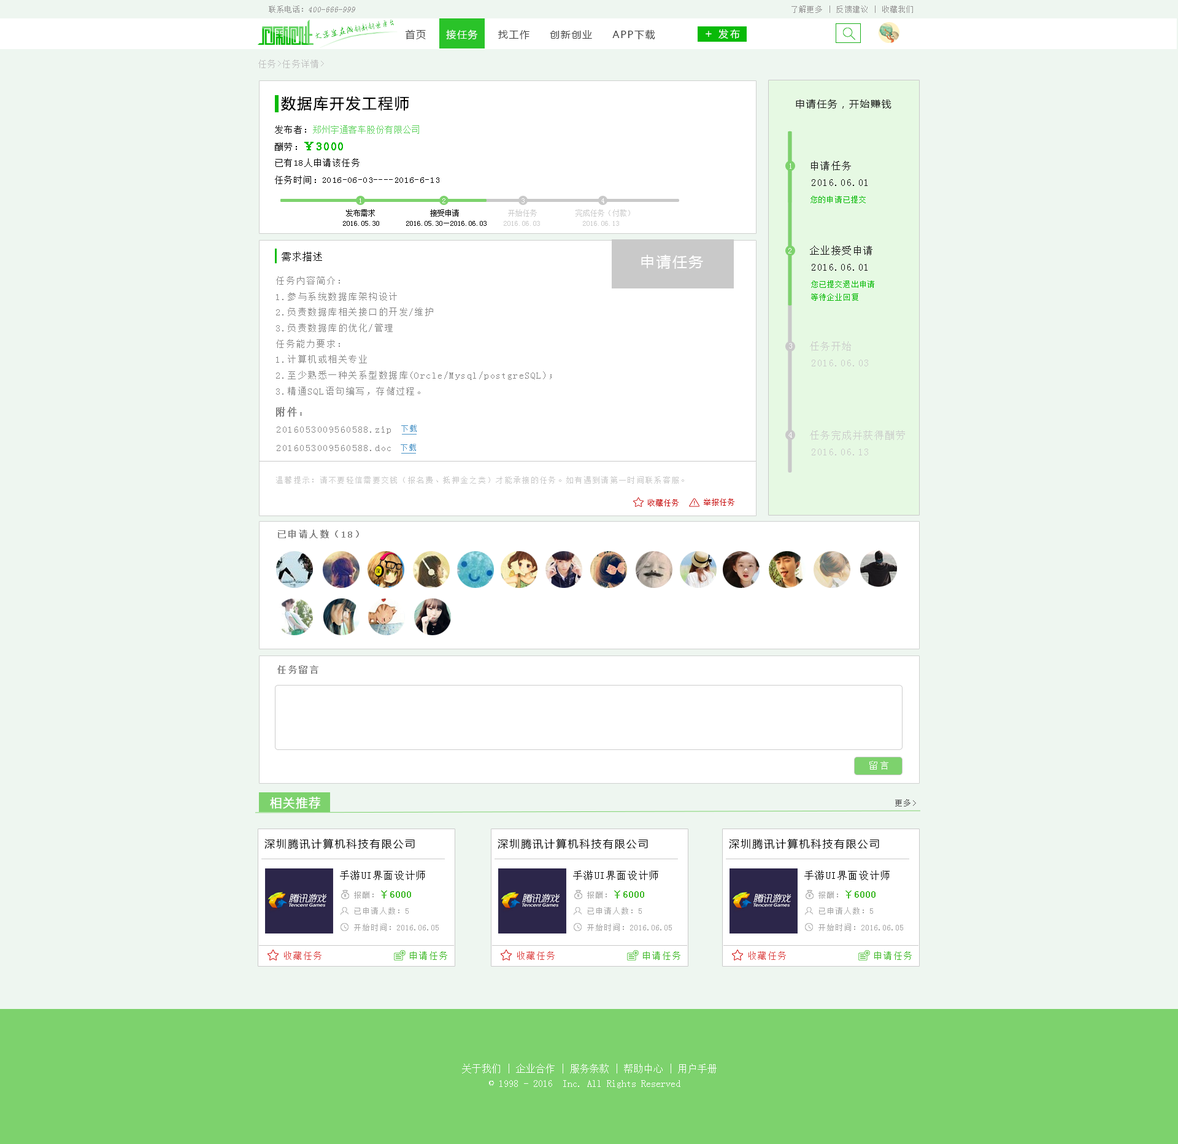
<style>
.page{position:relative;width:1178px;height:1144px;background:#eef6f0}
.page>*{position:absolute;margin:0}
.t1{font:8.2px "SimSun";color:#959595;font-style:italic}
.t2{font:8.2px "SimSun";color:#959595}
.t3{font:7.4px "SimSun";letter-spacing:0.1em;color:#959494}
.t4{font:7.6px "AnJingCheng-Xing-2.0";letter-spacing:-0.01em;color:#09ba08}
.t5{font:8.5px "AnJingCheng-Xing-2.0";letter-spacing:-0.01em;color:#09ba08}
.t6{font:9.8px "MicrosoftYaHei";letter-spacing:0.1em;color:#3e3e3e}
.t7{font:9.8px "MicrosoftYaHei";letter-spacing:0.1em;color:#ffffff}
.t8{font:9.8px "MicrosoftYaHei";letter-spacing:0.2em;color:#ffffff}
.t9{font:11.5px "MicrosoftYaHei";letter-spacing:0.2em;color:#ffffff}
.t10{font:8.6px "SimSun";letter-spacing:0.1em;color:#bebebe}
.t11{font:14.7px "MicrosoftYaHei";letter-spacing:0.1em;color:#000000}
.t12{font:9.8px "MicrosoftYaHei";letter-spacing:0.1em;color:#151515}
.t13{font:8.6px "SimSun";letter-spacing:0.05em;color:#62d361}
.t14{font:8.6px "SimSun";letter-spacing:0.1em;color:#000000}
.t15{font:11px "SimSun";letter-spacing:0.1em;color:#09ba08;font-weight:bold}
.t16{font:9.8px "SimSun";letter-spacing:0.1em;color:#151515}
.t17{font:7.8px "SimSun";letter-spacing:0.1em;color:#ffffff;scale:1.05 1}
.t18{font:7.4px "SimSun";letter-spacing:0.1em;color:#09ba08}
.t19{font:7.4px "SimSun";color:#000000}
.t20{font:7.4px "SimSun";letter-spacing:0.1em;color:#ffffff}
.t21{font:7.4px "SimSun";color:#c9c9c9}
.t22{font:10.6px "SimSun";color:#000000}
.t23{font:14.7px "MicrosoftYaHei";letter-spacing:0.1em;color:#ffffff}
.t24{font:9px "SimSun";letter-spacing:0.1em;color:#868686}
.t25{font:9.8px "SimSun";letter-spacing:0.1em;color:#c9c9c9}
.t26{font:9.8px "SimSun";letter-spacing:0.1em;color:#868686;font-weight:bold}
.t27{font:8.2px "SimSun";letter-spacing:0.1em;color:#4a93c6}
.t28{font:8.2px "SimSun";letter-spacing:0.1em;color:#c7c7c7}
.t29{font:8.2px "SimSun";color:#c70d0d}
.t30{font:9px "SimSun";letter-spacing:0.1em;color:#868686;font-weight:bold}
.t31{font:9px "SimSun";letter-spacing:0.2em;color:#ffffff}
.t32{font:11.5px "MicrosoftYaHei";letter-spacing:0.1em;color:#ffffff;font-weight:bold}
.t33{font:8.2px "SimSun";letter-spacing:0.1em;color:#505050}
.t34{font:10.6px "MicrosoftYaHei";letter-spacing:0.1em;color:#000000}
.t35{font:9.8px "SimSun";letter-spacing:0.1em;color:#000000}
.t36{font:9.8px "NSimSun";color:#3cb825;font-weight:bold}
.t37{font:8.2px "NSimSun";color:#a4a4a4}
.t38{font:9px "SimSun";letter-spacing:0.1em;color:#db3e3e}
.t39{font:9px "SimSun";letter-spacing:0.1em;color:#3cb825}
.t40{font:9.8px/14.7px "SimSun";color:#ffffff}
</style>
<div class="page">
<p class="t1" style="left:269px;top:6px;width:86px;height:7px"><span class="t2">联系电话：</span>400-666-999</p>
<p class="t3" style="left:792px;top:6px;width:121px;height:7px">了解更多 | 反馈建议 | 收藏我们</p>
<p class="t4" style="left:315px;top:19px;width:80px;height:20px;rotate:-10deg"><span class="t5">大学生在线</span>创新创业平台</p>
<p class="t6" style="left:405px;top:29px;width:250px;height:11px">首页     <span class="t7">接任务</span>     找工作     创新创业     APP下载</p>
<p class="t8" style="left:719px;top:29px;width:21px;height:10px">发布</p>
<p class="t9" style="left:706px;top:31px;width:6px;height:6px">+</p>
<p class="t10" style="left:258px;top:60px;width:66px;height:8px">任务&gt;任务详情&gt;</p>
<p class="t11" style="left:281px;top:96px;width:128px;height:15px">数据库开发工程师</p>
<p class="t12" style="left:796px;top:99px;width:96px;height:10px">申请任务，开始赚钱</p>
<p class="t13" style="left:275px;top:125px;width:144px;height:9px"><span class="t14">发布者：</span>郑州宇通客车股份有限公司</p>
<p class="t15" style="left:275px;top:142px;width:68px;height:9px"><span class="t14">酬劳：</span>￥3000</p>
<p class="t14" style="left:276px;top:158px;width:84px;height:9px">已有18人申请该任务</p>
<p class="t16" style="left:811px;top:161px;width:40px;height:10px">申请任务</p>
<p class="t17" style="left:790px;top:163px;width:2px;height:6px">1</p>
<p class="t14" style="left:275px;top:176px;width:164px;height:8px">任务时间：2016-06-03----2016-6-13</p>
<p class="t16" style="left:812px;top:179px;width:56px;height:7px">2016.06.01</p>
<p class="t18" style="left:811px;top:196px;width:55px;height:7px">您的申请已提交</p>
<p class="t19" style="left:346px;top:209px;width:29px;height:8px">发布需求</p>
<p class="t20" style="left:360px;top:198px;width:1px;height:5px">1</p>
<p class="t19" style="left:430px;top:209px;width:29px;height:8px">接受申请</p>
<p class="t20" style="left:442px;top:198px;width:4px;height:5px">2</p>
<p class="t21" style="left:508px;top:209px;width:29px;height:8px">开始任务</p>
<p class="t20" style="left:522px;top:198px;width:3px;height:5px">3</p>
<p class="t21" style="left:576px;top:209px;width:54px;height:8px">完成任务（付款）</p>
<p class="t20" style="left:601px;top:198px;width:4px;height:5px">4</p>
<p class="t19" style="left:343px;top:221px;width:36px;height:5px">2016.05.30</p>
<p class="t19" style="left:406px;top:221px;width:81px;height:5px">2016.05.30—2016.06.03</p>
<p class="t21" style="left:504px;top:221px;width:36px;height:5px">2016.06.03</p>
<p class="t21" style="left:583px;top:221px;width:36px;height:5px">2016.06.13</p>
<p class="t16" style="left:810px;top:245px;width:63px;height:10px">企业接受申请</p>
<p class="t22" style="left:282px;top:252px;width:40px;height:9px">需求描述</p>
<p class="t23" style="left:641px;top:255px;width:62px;height:14px">申请任务</p>
<p class="t17" style="left:789px;top:248px;width:3px;height:5px">2</p>
<p class="t16" style="left:812px;top:264px;width:56px;height:7px">2016.06.01</p>
<p class="t24" style="left:276px;top:276px;width:276px;height:119px">任务内容简介：<br>1.参与系统数据库架构设计<br>2.负责数据库相关接口的开发/维护<br>3.负责数据库的优化/管理<br>任务能力要求：<br>1.计算机或相关专业<br>2.至少熟悉一种关系型数据库(Orcle/Mysql/postgreSQL)；<br>3.精通SQL语句编写，存储过程。<br><br>附件是有关开发详细资料和协议内容。</p>
<p class="t18" style="left:811px;top:280px;width:64px;height:21px">您已提交退出申请<br>等待企业回复</p>
<p class="t25" style="left:810px;top:341px;width:41px;height:10px">任务开始</p>
<p class="t17" style="left:789px;top:343px;width:3px;height:6px">3</p>
<p class="t25" style="left:812px;top:360px;width:56px;height:6px">2016.06.03</p>
<p class="t26" style="left:276px;top:407px;width:26px;height:10px">附件：</p>
<p class="t27" style="left:401px;top:425px;width:16px;height:7px">下载</p>
<p class="t24" style="left:277px;top:427px;width:114px;height:7px">2016053009560588.zip</p>
<p class="t17" style="left:789px;top:432px;width:3px;height:6px">4</p>
<p class="t25" style="left:810px;top:430px;width:95px;height:10px">任务完成并获得酬劳</p>
<p class="t24" style="left:277px;top:445px;width:114px;height:6px">2016053009560588.doc</p>
<p class="t27" style="left:401px;top:444px;width:15px;height:7px">下载</p>
<p class="t25" style="left:812px;top:449px;width:56px;height:6px">2016.06.13</p>
<p class="t28" style="left:276px;top:476px;width:408px;height:8px">温馨提示：请不要轻信需要交钱（报名费、抵押金之类）才能承接的任务。如有遇到请第一时间联系客服。</p>
<p class="t29" style="left:648px;top:499px;width:31px;height:7px">收藏任务</p>
<p class="t29" style="left:704px;top:498px;width:31px;height:8px">举报任务</p>
<p class="t30" style="left:278px;top:530px;width:81px;height:8px">已申请人数（18）</p>
<p class="t30" style="left:277px;top:665px;width:42px;height:9px">任务留言</p>
<p class="t31" style="left:870px;top:761px;width:19px;height:9px">留言</p>
<p class="t32" style="left:270px;top:797px;width:50px;height:12px">相关推荐</p>
<p class="t33" style="left:895px;top:799px;width:21px;height:7px">更多&gt;</p>
<p class="t34" style="left:265px;top:838px;width:150px;height:11px">深圳腾讯计算机科技有限公司</p>
<p class="t34" style="left:498px;top:838px;width:150px;height:11px">深圳腾讯计算机科技有限公司</p>
<p class="t34" style="left:729px;top:838px;width:150px;height:11px">深圳腾讯计算机科技有限公司</p>
<p class="t35" style="left:340px;top:870px;width:85px;height:10px">手游UI界面设计师</p>
<p class="t35" style="left:573px;top:870px;width:86px;height:10px">手游UI界面设计师</p>
<p class="t35" style="left:805px;top:870px;width:85px;height:10px">手游UI界面设计师</p>
<p class="t36" style="left:354px;top:891px;width:57px;height:7px"><span class="t37">报酬：</span>￥6000</p>
<p class="t36" style="left:587px;top:891px;width:57px;height:7px"><span class="t37">报酬：</span>￥6000</p>
<p class="t36" style="left:819px;top:891px;width:57px;height:7px"><span class="t37">报酬：</span>￥6000</p>
<p class="t37" style="left:355px;top:907px;width:54px;height:7px">已申请人数：5</p>
<p class="t37" style="left:588px;top:907px;width:54px;height:7px">已申请人数：5</p>
<p class="t37" style="left:819px;top:907px;width:54px;height:7px">已申请人数：5</p>
<p class="t37" style="left:354px;top:924px;width:85px;height:7px">开始时间：2016.06.05</p>
<p class="t37" style="left:587px;top:924px;width:85px;height:7px">开始时间：2016.06.05</p>
<p class="t37" style="left:819px;top:924px;width:84px;height:7px">开始时间：2016.06.05</p>
<p class="t38" style="left:284px;top:951px;width:38px;height:9px">收藏任务</p>
<p class="t39" style="left:410px;top:951px;width:37px;height:9px">申请任务</p>
<p class="t38" style="left:517px;top:951px;width:38px;height:9px">收藏任务</p>
<p class="t39" style="left:643px;top:951px;width:38px;height:9px">申请任务</p>
<p class="t38" style="left:749px;top:951px;width:37px;height:9px">收藏任务</p>
<p class="t39" style="left:875px;top:951px;width:37px;height:9px">申请任务</p>
<p class="t40" style="left:462px;top:1064px;width:255px;height:24px;text-align:center">关于我们 | 企业合作 | 服务条款 | 帮助中心 | 用户手册<br>© 1998 - 2016  Inc. All Rights Reserved</p>
</div>
